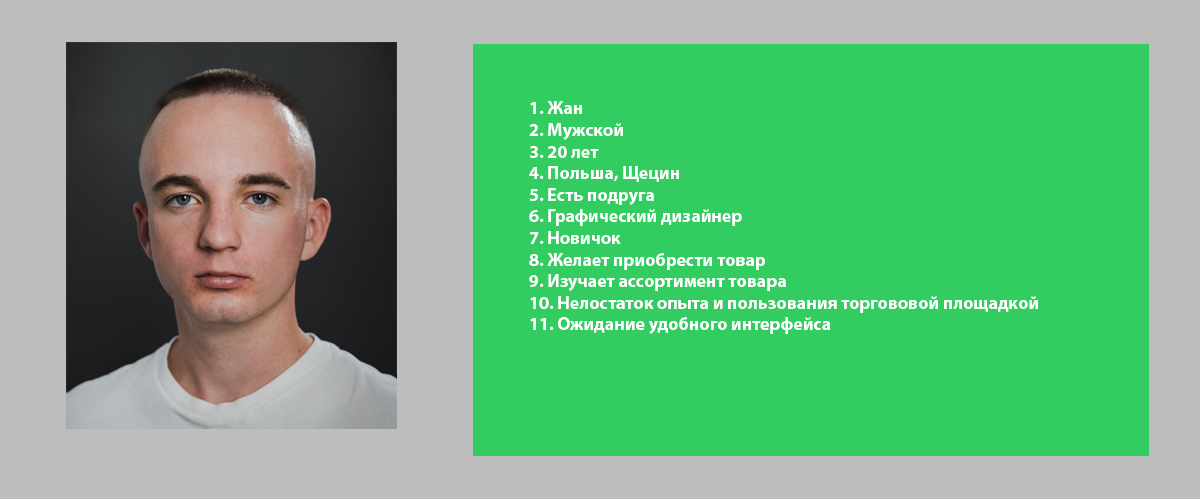
<style>
.page{position:relative;width:1200px;height:500px;background:#32cc60}
.page>*{position:absolute;margin:0}
.t1{font:18px "MyriadPro-Bold";color:#ffffff}
</style>
<div class="page">
<p class="t1" style="left:529px;top:101px;width:509px;height:233px">1. Жан<br>2. Мужской<br>3. 20 лет<br>4. Польша, Щецин<br>5. Есть подруга<br>6. Графический дизайнер<br>7. Новичок<br>8. Желает приобрести товар<br>9. Изучает ассортимент товара<br>10. Нелостаток опыта и пользования торгововой площадкой<br>11. Ожидание удобного интерфейса</p>
</div>
